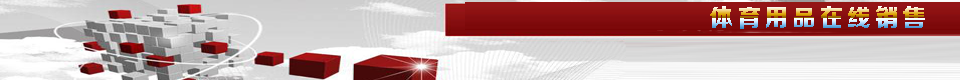
<style>
.page{position:relative;width:960px;height:80px}
.page>*{position:absolute;margin:0}
.t1{font:24px "FZZDHJW--GB1-0";letter-spacing:0.15em}
</style>
<div class="page">
<p class="t1" style="left:710px;top:6px;width:215px;height:23px">体育用品在线销售</p>
</div>
